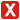
<style>
.page{position:relative;width:20px;height:20px;background:#d91e18}
.page>*{position:absolute;margin:0}
.t1{font:17.1px "Arial-BoldMT";color:#ffffff}
</style>
<div class="page">
<p class="t1" style="left:4px;top:3px;width:12px;height:14px">X</p>
</div>
